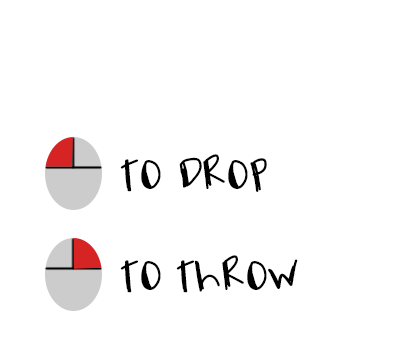
<style>
.page{position:relative;width:395px;height:350px;background:#ffffff}
.page>*{position:absolute;margin:0}
.t1{font:50px "ElectricCircus";letter-spacing:0.01em;color:#000000}
</style>
<div class="page">
<p class="t1" style="left:120px;top:154px;width:147px;height:38px">TO DROP</p>
<p class="t1" style="left:120px;top:255px;width:178px;height:38px">TO THROw</p>
</div>
